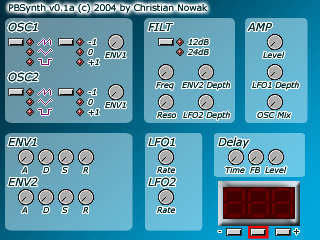
<style>
.page{position:relative;width:320px;height:240px}
.page>*{position:absolute;margin:0}
.t1{font:9px "Verdana";color:#002f33}
.t2{font:11px "Verdana-Italic";color:#002f33}
.t3{font:8px "Verdana-Italic";color:#002f33}
</style>
<div class="page">
<p class="t1" style="left:9px;top:4px;width:199px;height:9px">PBSynth v0.1a (c) 2004 by Christian Nowak</p>
<p class="t2" style="left:8px;top:22px;width:30px;height:10px">OSC1</p>
<p class="t2" style="left:148px;top:23px;width:25px;height:8px">FILT</p>
<p class="t2" style="left:247px;top:23px;width:25px;height:8px">AMP</p>
<p class="t3" style="left:88px;top:39px;width:8px;height:6px">-1</p>
<p class="t3" style="left:188px;top:38px;width:21px;height:7px">12dB</p>
<p class="t3" style="left:88px;top:49px;width:5px;height:6px">0</p>
<p class="t3" style="left:105px;top:52px;width:21px;height:6px">ENV1</p>
<p class="t3" style="left:188px;top:48px;width:21px;height:7px">24dB</p>
<p class="t3" style="left:263px;top:51px;width:22px;height:7px">Level</p>
<p class="t3" style="left:88px;top:59px;width:11px;height:7px">+1</p>
<p class="t2" style="left:8px;top:72px;width:31px;height:10px">OSC2</p>
<p class="t3" style="left:88px;top:89px;width:8px;height:6px">-1</p>
<p class="t3" style="left:156px;top:82px;width:18px;height:8px">Freq</p>
<p class="t3" style="left:182px;top:81px;width:48px;height:9px">ENV2 Depth</p>
<p class="t3" style="left:252px;top:81px;width:47px;height:9px">LFO1 Depth</p>
<p class="t3" style="left:88px;top:99px;width:5px;height:6px">0</p>
<p class="t3" style="left:105px;top:102px;width:21px;height:6px">ENV1</p>
<p class="t3" style="left:88px;top:109px;width:11px;height:7px">+1</p>
<p class="t3" style="left:157px;top:112px;width:19px;height:6px">Reso</p>
<p class="t3" style="left:183px;top:111px;width:47px;height:9px">LFO2 Depth</p>
<p class="t3" style="left:257px;top:112px;width:34px;height:6px">OSC Mix</p>
<p class="t2" style="left:148px;top:137px;width:27px;height:10px">LFO1</p>
<p class="t2" style="left:218px;top:137px;width:32px;height:12px">Delay</p>
<p class="t2" style="left:8px;top:138px;width:29px;height:8px">ENV1</p>
<p class="t3" style="left:21px;top:167px;width:6px;height:6px">A</p>
<p class="t3" style="left:43px;top:167px;width:6px;height:6px">D</p>
<p class="t3" style="left:62px;top:167px;width:6px;height:6px">S</p>
<p class="t3" style="left:83px;top:167px;width:5px;height:6px">R</p>
<p class="t3" style="left:157px;top:167px;width:18px;height:6px">Rate</p>
<p class="t3" style="left:225px;top:167px;width:20px;height:6px">Time</p>
<p class="t3" style="left:250px;top:167px;width:10px;height:6px">FB</p>
<p class="t3" style="left:265px;top:166px;width:22px;height:7px">Level</p>
<p class="t2" style="left:8px;top:177px;width:30px;height:9px">ENV2</p>
<p class="t2" style="left:148px;top:177px;width:28px;height:10px">LFO2</p>
<p class="t3" style="left:21px;top:207px;width:6px;height:6px">A</p>
<p class="t3" style="left:43px;top:207px;width:6px;height:6px">D</p>
<p class="t3" style="left:62px;top:207px;width:6px;height:6px">S</p>
<p class="t3" style="left:83px;top:207px;width:5px;height:6px">R</p>
<p class="t3" style="left:157px;top:207px;width:18px;height:6px">Rate</p>
<p class="t3" style="left:218px;top:231px;width:3px;height:1px">-</p>
<p class="t3" style="left:293px;top:229px;width:6px;height:6px">+</p>
</div>
